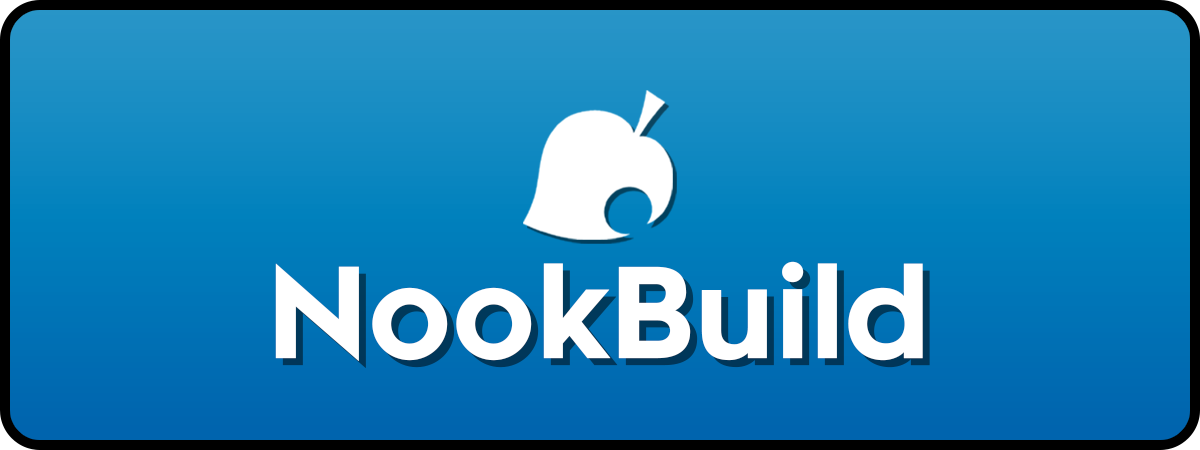
<style>
.page{position:relative;width:1200px;height:450px}
.page>*{position:absolute;margin:0}
.t1{font:124.8px "Renogare-Regular";letter-spacing:-0.05em;color:#ffffff;font-weight:bold}
</style>
<div class="page">
<p class="t1" style="left:275px;top:261px;width:648px;height:100px">NookBuild</p>
</div>
